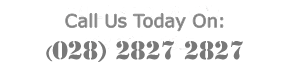
<style>
.page{position:relative;width:283px;height:71px;background:#ffffff}
.page>*{position:absolute;margin:0}
.t1{font:18px "MSReferenceSansSerif";color:#787878}
.t2{font:24px "StencilStd";color:#787878}
.t3{font:18px "StencilStd";color:#787878}
</style>
<div class="page">
<p class="t1" style="left:65px;top:13px;width:158px;height:18px">Call Us Today On:</p>
<p class="t2" style="left:46px;top:41px;width:197px;height:21px"><span class="t3">(</span>028) 2827 2827</p>
</div>
